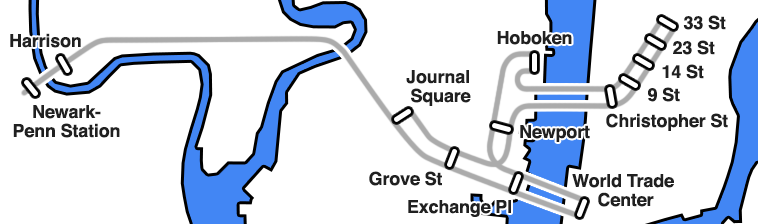
<style>
.page{position:relative;width:758px;height:224px;background:#ffffff}
.page>*{position:absolute;margin:0}
.t1{font:18px "Helvetica-Bold";letter-spacing:-0.01em;color:#202020}
.t2{font:18px/10px "Helvetica-Bold";letter-spacing:-0.01em;color:#202020}
</style>
<div class="page">
<p class="t1" style="left:683px;top:15px;width:43px;height:15px">33 St</p>
<p class="t1" style="left:10px;top:33px;width:71px;height:15px">Harrison</p>
<p class="t1" style="left:497px;top:31px;width:75px;height:14px">Hoboken</p>
<p class="t1" style="left:673px;top:40px;width:42px;height:15px">23 St</p>
<p class="t1" style="left:662px;top:64px;width:42px;height:15px">14 St</p>
<p class="t2" style="left:406px;top:70px;width:65px;height:36px;text-align:center">Journal <br>Square</p>
<p class="t1" style="left:648px;top:87px;width:32px;height:15px">9 St</p>
<p class="t2" style="left:13px;top:105px;width:107px;height:33px;text-align:center">Newark-<br>Penn Station</p>
<p class="t1" style="left:606px;top:113px;width:122px;height:18px">Christopher St</p>
<p class="t1" style="left:520px;top:125px;width:70px;height:17px">Newport</p>
<p class="t1" style="left:369px;top:171px;width:73px;height:15px">Grove St</p>
<p class="t2" style="left:572px;top:174px;width:102px;height:33px;text-align:center">World Trade <br>Center</p>
<p class="t1" style="left:408px;top:200px;width:103px;height:17px">Exchange Pl</p>
</div>
